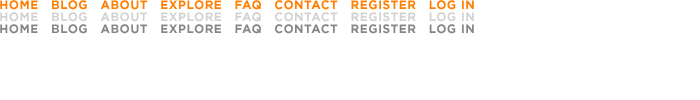
<style>
.page{position:relative;width:700px;height:100px;background:#ffffff}
.page>*{position:absolute;margin:0}
.t1{font:12px "GothamHTF-Bold";letter-spacing:0.04em;color:#ff7e00}
.t2{font:12px "GothamHTF-Bold";letter-spacing:0.04em;color:#d2d2d2}
.t3{font:12px "GothamHTF-Bold";letter-spacing:0.04em;color:#858585}
</style>
<div class="page">
<p class="t1" style="left:0px;top:0px;width:474px;height:10px">HOME   BLOG   ABOUT   EXPLORE   FAQ   CONTACT   REGISTER   LOG IN</p>
<p class="t2" style="left:0px;top:12px;width:474px;height:10px">HOME   BLOG   ABOUT   EXPLORE   FAQ   CONTACT   REGISTER   LOG IN</p>
<p class="t3" style="left:0px;top:24px;width:474px;height:10px">HOME   BLOG   ABOUT   EXPLORE   FAQ   CONTACT   REGISTER   LOG IN</p>
</div>
